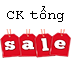
<style>
.page{position:relative;width:71px;height:58px;background:#ffffff}
.page>*{position:absolute;margin:0}
.t1{font:15.3px "CourierNewPSMT";color:#000000}
</style>
<div class="page">
<p class="t1" style="left:7px;top:6px;width:57px;height:16px">CK tổng</p>
</div>
